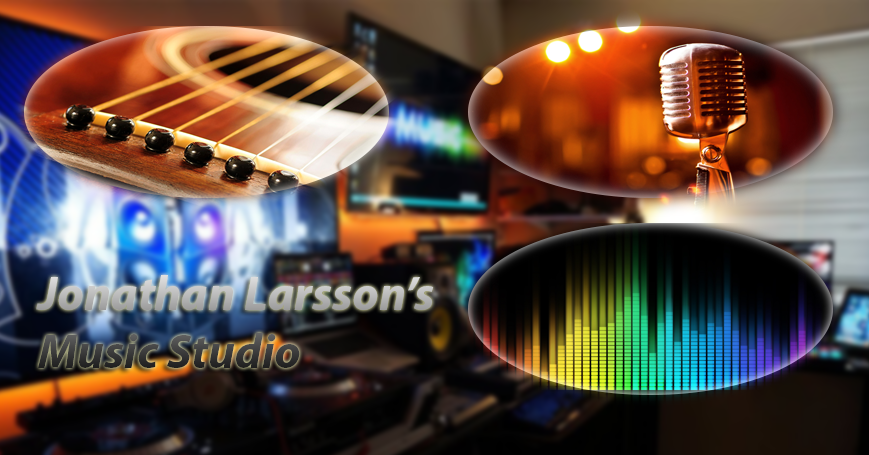
<style>
.page{position:relative;width:869px;height:455px}
.page>*{position:absolute;margin:0}
.t1{font:48px "MyriadPro-BoldIt"}
</style>
<div class="page">
<p class="t1" style="left:36px;top:275px;width:398px;height:93px">Jonathan Larsson’s<br>Music Studio</p>
</div>
